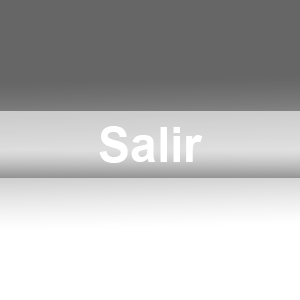
<style>
.page{position:relative;width:300px;height:300px;background:#ffffff}
.page>*{position:absolute;margin:0}
.t1{font:48px "Arial-BoldMT";color:#ffffff}
</style>
<div class="page">
<p class="t1" style="left:99px;top:126px;width:104px;height:37px">Salir</p>
</div>
